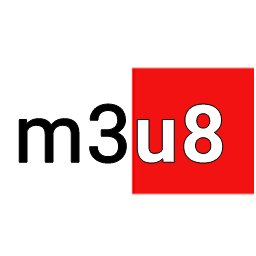
<style>
.page{position:relative;width:256px;height:256px;background:#ffffff}
.page>*{position:absolute;margin:0}
.t1{font:80px "Roboto-Regular";color:#000000;font-weight:bold}
.t2{font:80px "Roboto-Bold";color:#ffffff;font-weight:bold}
</style>
<div class="page">
<p class="t1" style="left:19px;top:104px;width:204px;height:59px">m3<span class="t2">u8</span></p>
</div>
